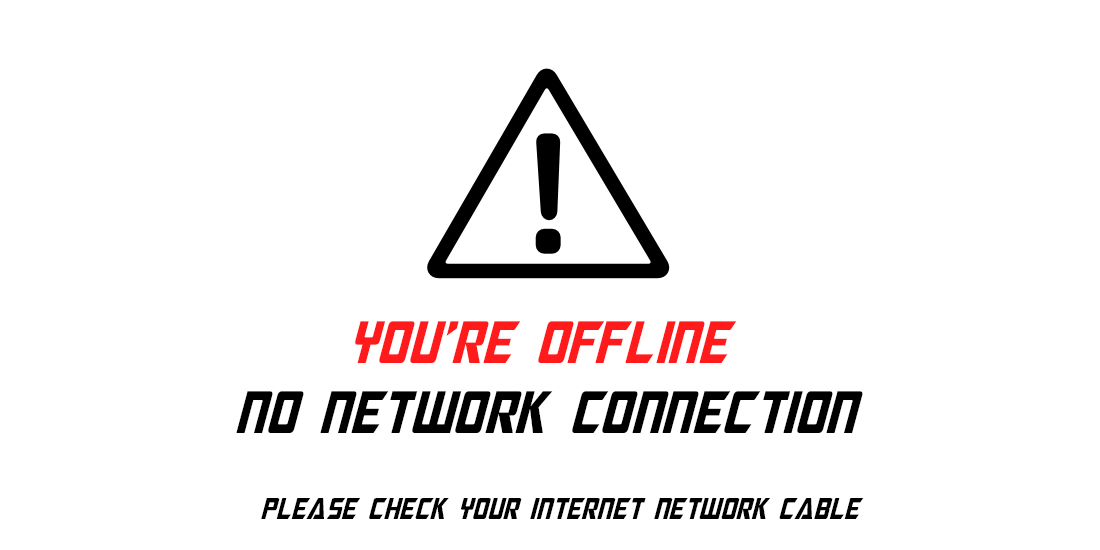
<style>
.page{position:relative;width:1100px;height:550px;background:#ffffff}
.page>*{position:absolute;margin:0}
.t1{font:60px "MegatronCondensed-Italic";color:#ff1b1b}
.t2{font:60px "MegatronCondensed-Italic";color:#000000}
.t3{font:30px "MegatronCondensed-Italic";color:#000000}
</style>
<div class="page">
<p class="t1" style="left:355px;top:321px;width:382px;height:42px">you’re offline</p>
<p class="t2" style="left:236px;top:391px;width:627px;height:42px">no network connection</p>
<p class="t3" style="left:261px;top:498px;width:603px;height:21px">please check your internet network CABLE</p>
</div>
